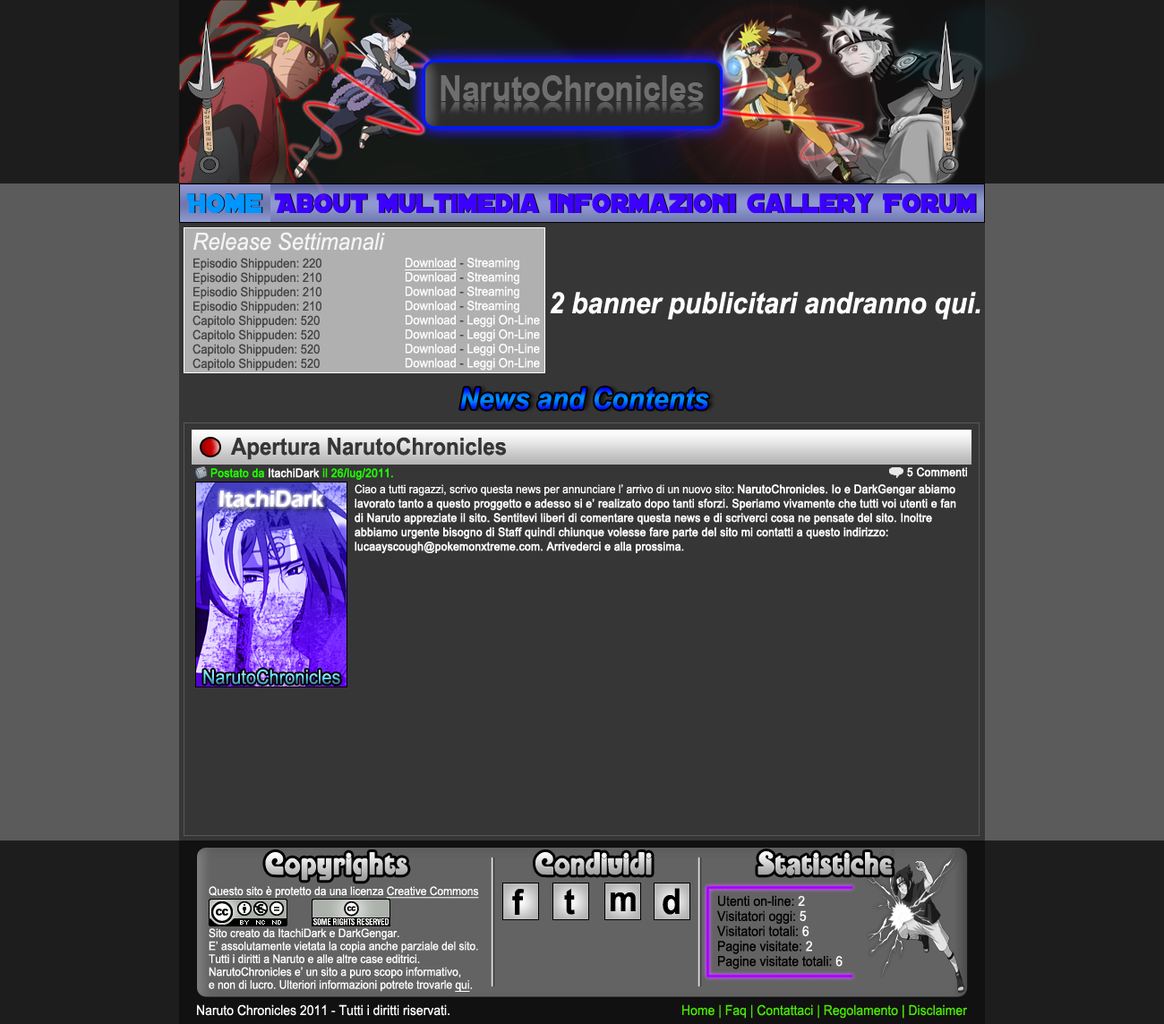
<style>
.page{position:relative;width:1164px;height:1024px;background:#363636}
.page>*{position:absolute;margin:0}
.t1{font:35.5px "Arial-BoldMT";letter-spacing:-0.01em;color:#6f6f6f;scale:0.91 1}
.t2{font:29.5px "DistantGalaxy";color:#0096ff;scale:0.91 1}
.t3{font:29.5px "DistantGalaxy";color:#3c00ff;scale:0.91 1}
.t4{font:23.6px "Arial-ItalicMT";color:#ffffff;scale:0.91 1}
.t5{font:12.8px/14.3px "ArialMT";color:#434343;scale:0.91 1}
.t6{font:12.8px/14.3px "ArialMT";color:#ffffff;scale:0.91 1}
.t7{font:12.8px/14.3px "ArialMT";color:#ffffff;text-decoration:underline;scale:0.91 1}
.t8{font:29.5px "Arial-BoldItalicMT";color:#ffffff;scale:0.91 1}
.t9{font:29.5px "Arial-BoldItalicMT";scale:0.91 1}
.t10{font:23.6px "Arial-BoldMT";color:#363636;scale:0.91 1}
.t11{font:11.8px "ArialMT";color:#1eff00;font-weight:bold;scale:0.91 1}
.t12{font:11.8px "ArialMT";color:#ffffff;font-weight:bold;scale:0.91 1}
.t13{font:11.8px/14.3px "ArialMT";color:#ffffff;font-weight:bold;scale:0.91 1}
.t14{font:11.8px/14.3px "ArialMT";color:#ffffff;scale:0.91 1}
.t15{font:27.6px "Enliven";letter-spacing:0.01em;scale:0.91 1}
.t16{font:27.6px "Enliven";scale:0.91 1}
.t17{font:11.8px "ArialMT";color:#ffffff;scale:0.91 1}
.t18{font:11.8px "ArialMT";color:#ffffff;text-decoration:underline;scale:0.91 1}
.t19{font:35.5px "Arial-BoldMT";color:#000000;scale:0.91 1}
.t20{font:13.8px "ArialMT";color:#000000;scale:0.91 1}
.t21{font:13.8px "ArialMT";color:#ffffff;scale:0.91 1}
.t22{font:13.8px "ArialMT";color:#48ea00;scale:0.91 1}
</style>
<div class="page">
<p class="t1" style="left:441px;top:75px;width:263px;height:26px">NarutoChronicles</p>
<p class="t2" style="left:186px;top:193px;width:76px;height:20px">Home</p>
<p class="t3" style="left:274px;top:193px;width:702px;height:20px">About Multimedia Informazioni gallery Forum</p>
<p class="t4" style="left:193px;top:232px;width:192px;height:19px">Release Settimanali</p>
<p class="t5" style="left:193px;top:258px;width:128px;height:113px">Episodio Shippuden: 220<br>Episodio Shippuden: 210<br>Episodio Shippuden: 210<br>Episodio Shippuden: 210<br>Capitolo Shippuden: 520<br>Capitolo Shippuden: 520<br>Capitolo Shippuden: 520<br>Capitolo Shippuden: 520</p>
<p class="t6" style="left:405px;top:257px;width:135px;height:114px"><span class="t7">Download </span><span class="t5">-</span> Streaming<br>Download <span class="t5">-</span> Streaming<br>Download <span class="t5">-</span> Streaming<br>Download <span class="t5">-</span> Streaming<br>Download <span class="t5">- </span>Leggi On-Line<br>Download <span class="t5">-</span> Leggi On-Line<br>Download <span class="t5">-</span> Leggi On-Line<br>Download <span class="t5">-</span> Leggi On-Line</p>
<p class="t8" style="left:550px;top:292px;width:430px;height:28px">2 banner publicitari andranno qui.</p>
<p class="t9" style="left:460px;top:387px;width:249px;height:23px">News and Contents</p>
<p class="t10" style="left:231px;top:437px;width:275px;height:23px">Apertura NarutoChronicles</p>
<p class="t11" style="left:210px;top:468px;width:183px;height:12px">Postato da <span class="t12">ItachiDark </span>il 26/lug/2011.</p>
<p class="t12" style="left:907px;top:467px;width:60px;height:10px">5 Commenti</p>
<p class="t13" style="left:355px;top:484px;width:601px;height:69px"><span class="t14">Ciao a tutti ragazzi, scrivo questa news per annunciare l’ arrivo di un nuovo sito: </span>NarutoChronicles. Io e DarkGengar abiamo<br>lavorato tanto a questo proggetto e adesso si e’ realizato dopo tanti sforzi. Speriamo vivamente che tutti voi utenti e fan<br>di Naruto appreziate il sito. Sentitevi liberi di comentare questa news e di scriverci cosa ne pensate del sito. Inoltre<br>abbiamo urgente bisogno di Staff quindi chiunque volesse fare parte del sito mi contatti a questo indirizzo:<br>lucaayscough@pokemonxtreme.com. Arrivederci e alla prossima.</p>
<p class="t15" style="left:265px;top:852px;width:143px;height:30px">Copyrights</p>
<p class="t16" style="left:535px;top:852px;width:117px;height:24px">Condividi</p>
<p class="t16" style="left:758px;top:852px;width:135px;height:24px">Statistiche</p>
<p class="t17" style="left:209px;top:886px;width:270px;height:13px">Questo sito è protetto da una licenza <span class="t18">Creative Commons</span></p>
<p class="t19" style="left:512px;top:889px;width:13px;height:26px">f</p>
<p class="t19" style="left:564px;top:889px;width:11px;height:26px">t</p>
<p class="t19" style="left:611px;top:893px;width:25px;height:19px">m</p>
<p class="t19" style="left:663px;top:888px;width:17px;height:27px">d</p>
<p class="t20" style="left:717px;top:895px;width:126px;height:75px">Utenti on-line: <span class="t21">2<br></span>Visitatori oggi: <span class="t21">5<br></span>Visitatori totali: <span class="t21">6<br></span>Pagine visitate: <span class="t21">2<br></span>Pagine visitate totali: <span class="t21">6</span></p>
<p class="t17" style="left:209px;top:929px;width:269px;height:63px">Sito creato da ItachiDark e DarkGengar.<br>E’ assolutamente vietata la copia anche parziale del sito.<br>Tutti i diritti a Naruto e alle altre case editrici.<br>NarutoChronicles e’ un sito a puro scopo informativo,<br>e non di lucro. Ulteriori informazioni potrete trovarle <span class="t18">qui</span>.</p>
<p class="t21" style="left:197px;top:1005px;width:253px;height:11px">Naruto Chronicles 2011 - Tutti i diritti riservati.</p>
<p class="t22" style="left:682px;top:1005px;width:285px;height:14px">Home | Faq | Contattaci | Regolamento | Disclaimer</p>
</div>
